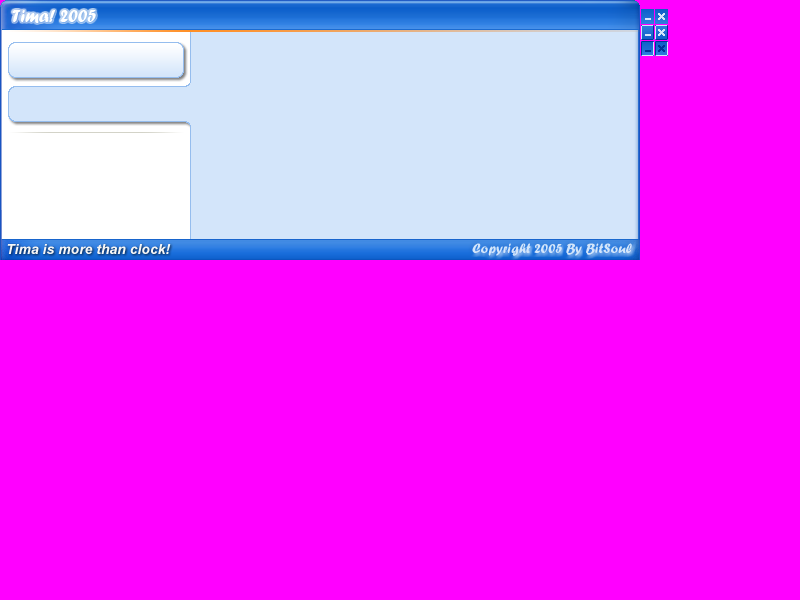
<style>
.page{position:relative;width:800px;height:600px;background:#ff00ff}
.page>*{position:absolute;margin:0}
.t1{font:18px "ForteMT";color:#ffffff}
.t2{font:14px "Arial-BoldItalicMT";color:#f5f5f5}
.t3{font:14px "ForteMT";color:#d3e5fa}
</style>
<div class="page">
<p class="t1" style="left:12px;top:10px;width:84px;height:13px">Tima! 2005</p>
<p class="t2" style="left:7px;top:244px;width:164px;height:10px">Tima is more than clock!</p>
<p class="t3" style="left:472px;top:243px;width:160px;height:13px">Copyright 2005 By BitSoul</p>
</div>
